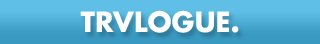
<style>
.page{position:relative;width:320px;height:44px;background:#5fbfe7}
.page>*{position:absolute;margin:0}
.t1{font:27.2px "Futura-Bold";color:#ffffff}
</style>
<div class="page">
<p class="t1" style="left:80px;top:10px;width:159px;height:23px">TRVLOGUE.</p>
</div>
